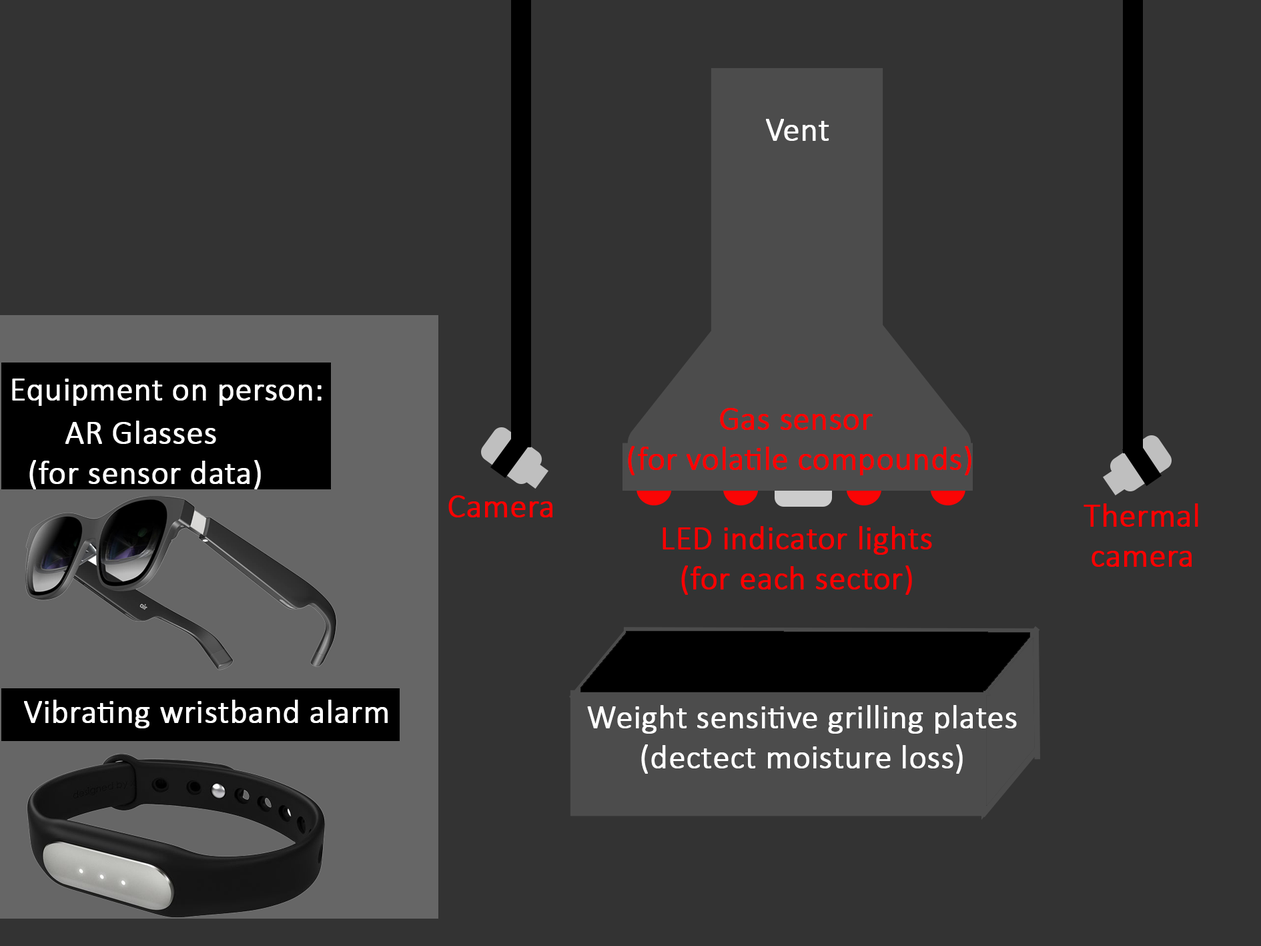
<style>
.page{position:relative;width:1261px;height:946px;background:#333333}
.page>*{position:absolute;margin:0}
.t1{font:33.4px "Calibri-Light";color:#ffffff;font-weight:bold}
.t2{font:33.4px "Calibri-Light";color:#ff0000;font-weight:bold}
</style>
<div class="page">
<p class="t1" style="left:766px;top:119px;width:63px;height:22px">Vent</p>
<p class="t1" style="left:12px;top:378px;width:310px;height:28px">Equipment on person:</p>
<p class="t2" style="left:628px;top:408px;width:344px;height:67px;text-align:center">Gas sensor <br>(for volatile compounds)</p>
<p class="t1" style="left:29px;top:420px;width:232px;height:69px;text-align:center">AR Glasses <br>(for sensor data)</p>
<p class="t2" style="left:448px;top:495px;width:104px;height:22px">Camera</p>
<p class="t2" style="left:1084px;top:503px;width:114px;height:64px;text-align:center">Thermal<br>camera</p>
<p class="t2" style="left:663px;top:526px;width:269px;height:69px;text-align:center">LED indicator lights<br>(for each sector)</p>
<p class="t1" style="left:24px;top:699px;width:364px;height:29px">Vibrating wristband alarm</p>
<p class="t1" style="left:587px;top:705px;width:430px;height:68px;text-align:center">Weight sensitive grilling plates<br>(dectect moisture loss)</p>
</div>
